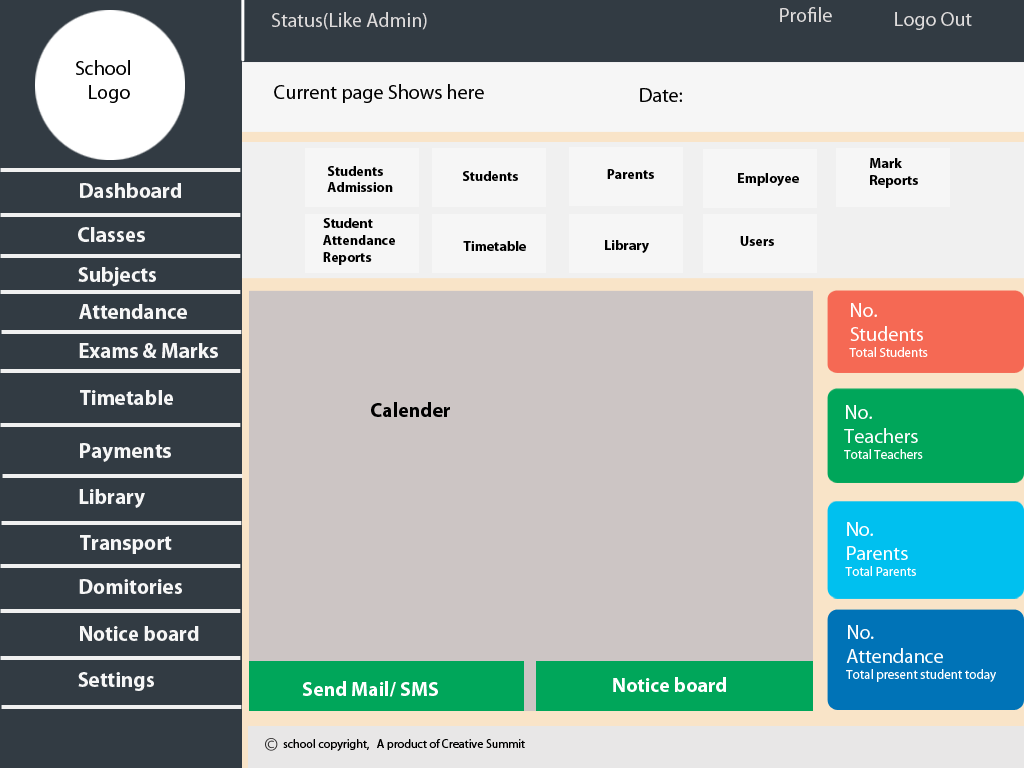
<style>
.page{position:relative;width:1024px;height:768px;background:#ccc5c4}
.page>*{position:absolute;margin:0}
.t1{font:20px "MyriadPro-Regular";color:#dfdcdc}
.t2{font:20px "MyriadPro-Regular";color:#000000}
.t3{font:14px "MyriadPro-Bold";color:#000000}
.t4{font:21px "MyriadPro-Bold";color:#f6f6f6}
.t5{font:13px "MyriadPro-Regular";color:#ffffff}
.t6{font:20px "MyriadPro-Regular";color:#ffffff}
.t7{font:20px "MyriadPro-Bold";color:#000000}
.t8{font:20px "MyriadPro-Bold";color:#ffffff}
.t9{font:12px "MyriadPro-Regular";color:#000000}
</style>
<div class="page">
<p class="t1" style="left:272px;top:12px;width:155px;height:18px">Status(Like Admin)</p>
<p class="t1" style="left:780px;top:7px;width:52px;height:15px">Profile</p>
<p class="t1" style="left:895px;top:12px;width:77px;height:18px">Logo Out</p>
<p class="t2" style="left:76px;top:60px;width:54px;height:43px">School<br>   Logo</p>
<p class="t2" style="left:274px;top:84px;width:210px;height:19px">Current page Shows here</p>
<p class="t2" style="left:640px;top:88px;width:42px;height:14px">Date:</p>
<p class="t3" style="left:870px;top:158px;width:48px;height:30px">Mark<br>Reports</p>
<p class="t3" style="left:327px;top:166px;width:66px;height:26px">Students<br>Admission</p>
<p class="t3" style="left:463px;top:171px;width:55px;height:10px">Students</p>
<p class="t3" style="left:607px;top:169px;width:47px;height:10px">Parents</p>
<p class="t3" style="left:738px;top:173px;width:61px;height:13px">Employee</p>
<p class="t4" style="left:80px;top:183px;width:101px;height:15px">Dashboard</p>
<p class="t3" style="left:323px;top:218px;width:72px;height:47px">Student<br>Attendance<br>Reports</p>
<p class="t4" style="left:78px;top:227px;width:67px;height:15px">Classes</p>
<p class="t3" style="left:463px;top:241px;width:63px;height:10px">Timetable</p>
<p class="t3" style="left:605px;top:240px;width:44px;height:13px">Library</p>
<p class="t3" style="left:740px;top:236px;width:34px;height:10px">Users</p>
<p class="t4" style="left:78px;top:267px;width:78px;height:20px">Subjects</p>
<p class="t4" style="left:79px;top:304px;width:108px;height:15px">Attendance</p>
<p class="t5" style="left:849px;top:303px;width:79px;height:54px"><span class="t6">No.<br>Students<br></span>Total Students</p>
<p class="t4" style="left:79px;top:343px;width:139px;height:15px">Exams &amp; Marks</p>
<p class="t4" style="left:80px;top:390px;width:93px;height:15px">Timetable</p>
<p class="t7" style="left:371px;top:402px;width:79px;height:15px">Calender</p>
<p class="t5" style="left:844px;top:405px;width:79px;height:54px"><span class="t6">No.<br>Teachers<br></span>Total Teachers</p>
<p class="t4" style="left:80px;top:443px;width:91px;height:19px">Payments</p>
<p class="t4" style="left:79px;top:489px;width:66px;height:19px">Library</p>
<p class="t5" style="left:845px;top:522px;width:71px;height:54px"><span class="t6">No.<br>Parents<br></span>Total Parents</p>
<p class="t4" style="left:80px;top:535px;width:92px;height:19px">Transport</p>
<p class="t4" style="left:79px;top:579px;width:103px;height:15px">Domitories</p>
<p class="t4" style="left:80px;top:626px;width:119px;height:15px">Notice board</p>
<p class="t5" style="left:846px;top:625px;width:150px;height:57px"><span class="t6">No.<br>Attendance<br></span>Total present student today</p>
<p class="t4" style="left:78px;top:672px;width:76px;height:19px">Settings</p>
<p class="t8" style="left:613px;top:677px;width:113px;height:15px">Notice board</p>
<p class="t8" style="left:302px;top:681px;width:136px;height:16px">Send Mail/ SMS</p>
<p class="t9" style="left:283px;top:739px;width:242px;height:12px">school copyright,   A product of Creative Summit</p>
</div>
